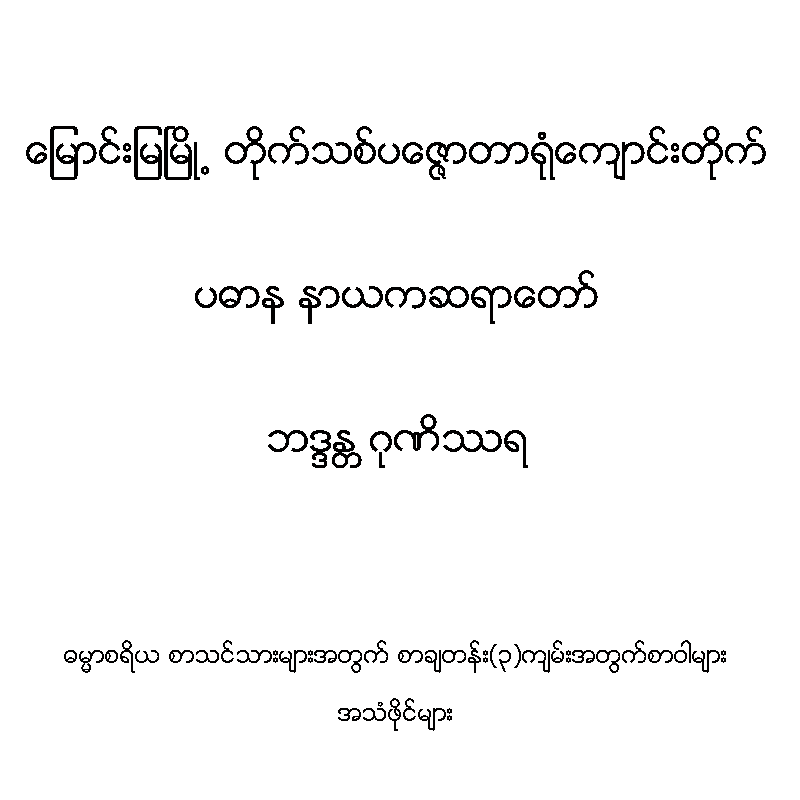
<style>
.page{position:relative;width:800px;height:800px;background:#ffffff}
.page>*{position:absolute;margin:0}
.t1{font:40px "Zawgyi-One";color:#010000}
.t2{font:24px "Zawgyi-One";color:#010000}
</style>
<div class="page">
<p class="t1" style="left:26px;top:126px;width:740px;height:342px;text-align:center">ေျမာင္းျမၿမိဳ႕ တိုက္သစ္ပေဇၨာတာရုံေက်ာင္းတိုက္<br><br> <br>ပဓာန နာယကဆရာေတာ္ <br><br><br>ဘဒၵႏ ၱဂုဏိႆရ</p>
<p class="t2" style="left:64px;top:640px;width:662px;height:91px;text-align:center">ဓမၼာစရိယ စာသင္သားမ်ားအတြက္ စာခ်တန္း(၃)က်မ္းအတြက္စာဝါမ်ား <br><br>အသံဖိုင္မ်ား</p>
</div>
